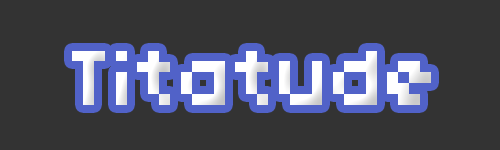
<style>
.page{position:relative;width:500px;height:150px;background:#333333}
.page>*{position:absolute;margin:0}
.t1{font:87px "04b03";color:#ffffff}
</style>
<div class="page">
<p class="t1" style="left:72px;top:51px;width:359px;height:54px">Titatude</p>
</div>
